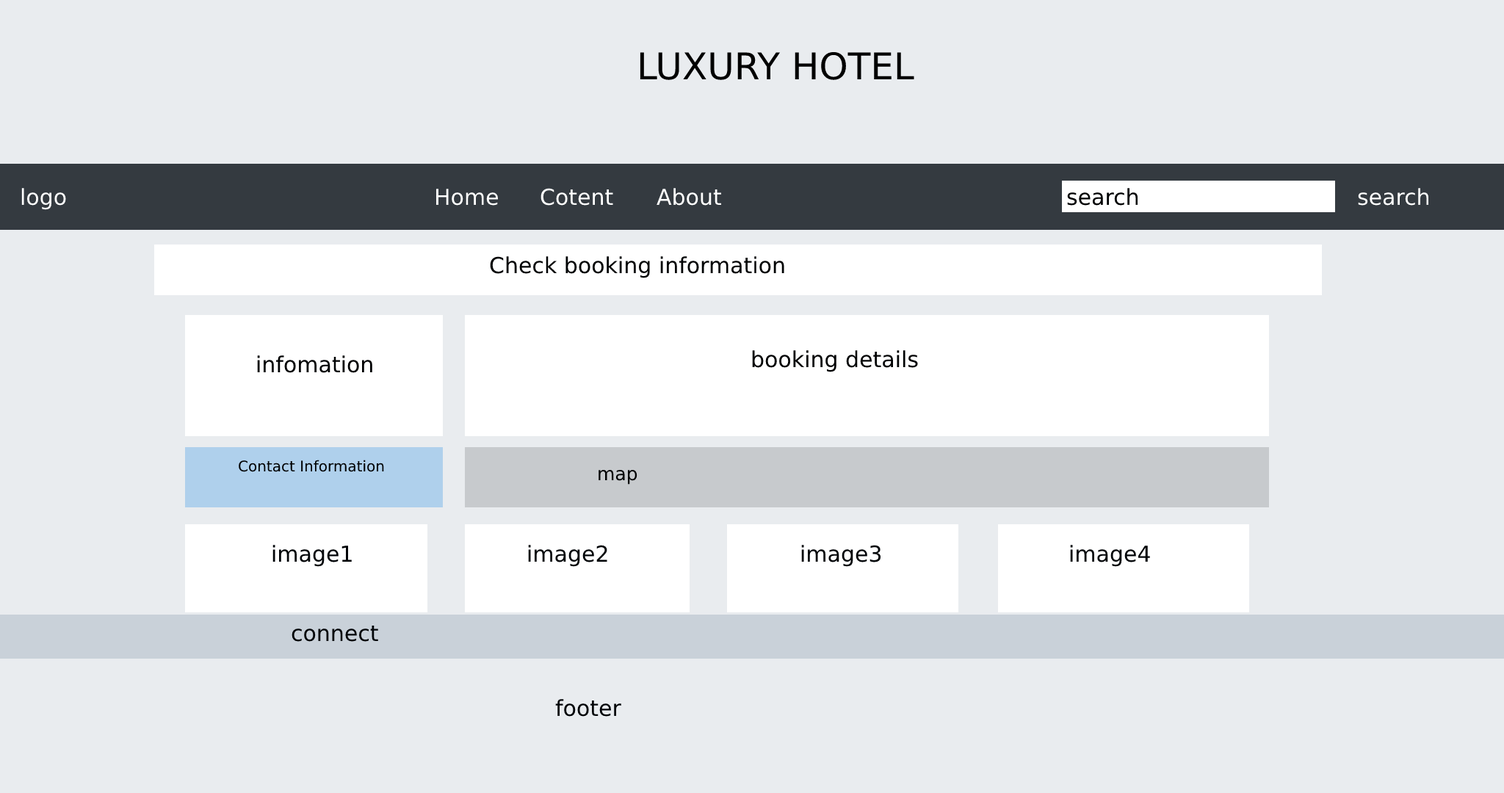
<style>
.page{position:relative;width:1504px;height:793px;background:#e9ecef}
.page>*{position:absolute;margin:0}
.t1{font:36.7px "DejaVuSans";color:#000000}
.t2{font:22px "DejaVuSans";color:#ffffff}
.t3{font:22px "DejaVuSans";color:#000203}
.t4{font:14.7px "DejaVuSans";color:#000203}
.t5{font:18.4px "DejaVuSans";color:#000203}
.t6{font:22px "DejaVuSans";color:#020508}
</style>
<div class="page">
<p class="t1" style="left:640px;top:51px;width:274px;height:29px">LUXURY HOTEL</p>
<p class="t2" style="left:21px;top:188px;width:45px;height:22px">logo</p>
<p class="t2" style="left:435px;top:189px;width:63px;height:17px">Home</p>
<p class="t2" style="left:540px;top:188px;width:73px;height:18px">Cotent</p>
<p class="t2" style="left:656px;top:188px;width:65px;height:18px">About</p>
<p class="t3" style="left:1067px;top:188px;width:71px;height:18px">search</p>
<p class="t2" style="left:1358px;top:188px;width:71px;height:18px">search</p>
<p class="t3" style="left:490px;top:256px;width:294px;height:22px">Check booking information</p>
<p class="t3" style="left:752px;top:350px;width:166px;height:22px">booking details</p>
<p class="t3" style="left:257px;top:355px;width:115px;height:18px">infomation</p>
<p class="t4" style="left:239px;top:460px;width:145px;height:12px">Contact Information</p>
<p class="t5" style="left:598px;top:469px;width:39px;height:16px">map</p>
<p class="t6" style="left:272px;top:545px;width:80px;height:22px">image1</p>
<p class="t6" style="left:528px;top:545px;width:79px;height:22px">image2</p>
<p class="t6" style="left:801px;top:545px;width:80px;height:22px">image3</p>
<p class="t6" style="left:1070px;top:545px;width:80px;height:22px">image4</p>
<p class="t6" style="left:291px;top:625px;width:87px;height:17px">connect</p>
<p class="t6" style="left:555px;top:699px;width:66px;height:18px">footer</p>
</div>
